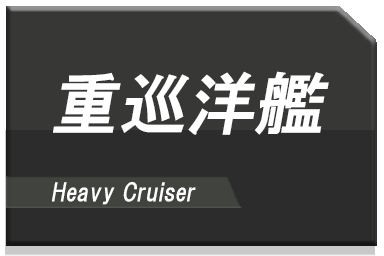
<style>
.page{position:relative;width:384px;height:256px;background:#373836}
.page>*{position:absolute;margin:0}
.t1{font:68px "HGPGothicE";color:#ffffff;font-style:italic}
.t2{font:24px "HGPGothicE";color:#ffffff;font-style:italic}
</style>
<div class="page">
<p class="t1" style="left:53px;top:71px;width:276px;height:64px">重巡洋艦</p>
<p class="t2" style="left:51px;top:182px;width:145px;height:23px">Heavy Cruiser</p>
</div>
